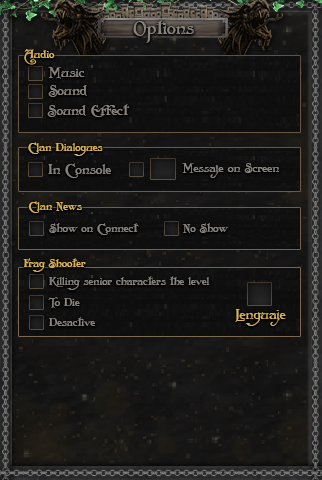
<style>
.page{position:relative;width:322px;height:480px}
.page>*{position:absolute;margin:0}
.t1{font:18.1px "Folkard";color:#88837e}
.t2{font:11.2px "Folkard";color:#d9b357}
.t3{font:13.8px "Folkard";color:#88837e}
.t4{font:12.1px "Folkard";color:#88837e}
.t5{font:11.5px "Folkard";color:#88837e}
.t6{font:11.2px "Folkard";color:#88837e}
.t7{font:14.3px "Folkard";color:#d9b357}
</style>
<div class="page">
<p class="t1" style="left:133px;top:20px;width:61px;height:23px">Options</p>
<p class="t2" style="left:24px;top:49px;width:31px;height:16px">Audio</p>
<p class="t3" style="left:48px;top:67px;width:37px;height:12px">Music</p>
<p class="t3" style="left:48px;top:85px;width:39px;height:12px">Sound</p>
<p class="t3" style="left:47px;top:104px;width:83px;height:13px">Sound Effect</p>
<p class="t2" style="left:28px;top:142px;width:75px;height:14px">Clan Dialogues</p>
<p class="t3" style="left:48px;top:163px;width:63px;height:15px">In Console</p>
<p class="t4" style="left:182px;top:163px;width:97px;height:15px">Messaje on Screen</p>
<p class="t2" style="left:28px;top:201px;width:54px;height:12px">Clan News</p>
<p class="t5" style="left:49px;top:223px;width:90px;height:12px">Show on Connect</p>
<p class="t5" style="left:182px;top:223px;width:47px;height:10px">No Show</p>
<p class="t2" style="left:23px;top:258px;width:63px;height:14px">Frag Shooter</p>
<p class="t6" style="left:49px;top:276px;width:161px;height:14px">Killing senior characters the level</p>
<p class="t6" style="left:48px;top:297px;width:32px;height:11px">To Die</p>
<p class="t6" style="left:49px;top:317px;width:46px;height:9px">Desactive</p>
<p class="t7" style="left:235px;top:309px;width:51px;height:17px">Lenguaje</p>
</div>
